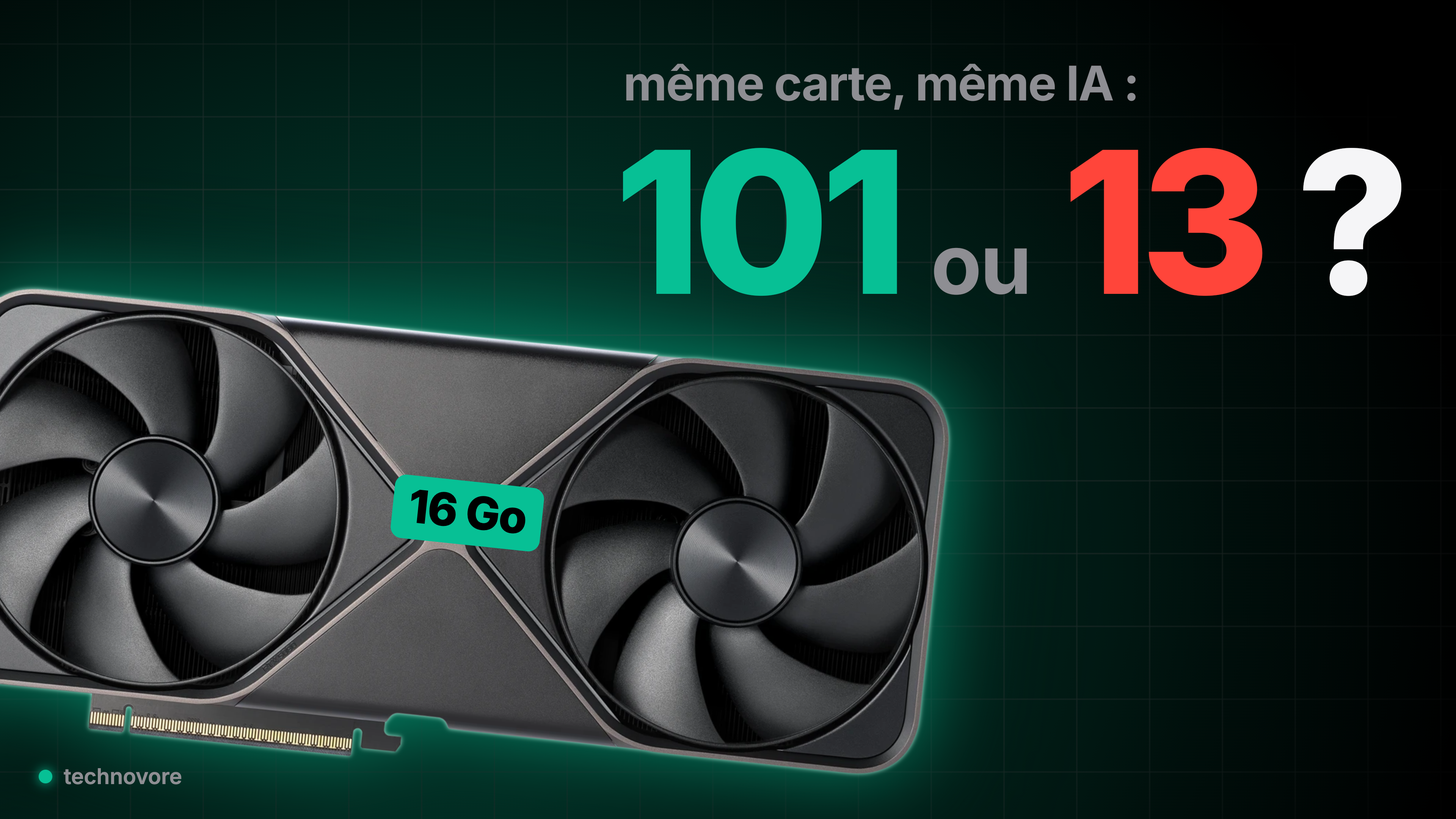
<style>
.page{position:relative;width:1456px;height:819px}
.page>*{position:absolute;margin:0}
.t1{font:47.8px "Inter-Bold";letter-spacing:-0.02em;color:#8e8e93}
.t2{font:197.9px "Inter-ExtraBold";letter-spacing:-0.045em;color:#07c095}
.t3{font:197.9px "Inter-ExtraBold";letter-spacing:-0.045em;color:#ff453a}
.t4{font:197.9px "Inter-ExtraBold";letter-spacing:-0.045em;color:#f5f5f7}
.t5{font:83.1px "Inter-Bold";letter-spacing:-0.02em;color:#8e8e93}
</style>
<div class="page">
<p class="t1" style="left:626px;top:64px;width:510px;height:46px">même carte, même IA :</p>
<p class="t2" style="left:623px;top:148px;width:274px;height:149px">101</p>
<p class="t3" style="left:1070px;top:148px;width:332px;height:149px">13<span class="t4"> ?</span></p>
<p class="t5" style="left:933px;top:248px;width:94px;height:47px">ou</p>
</div>
